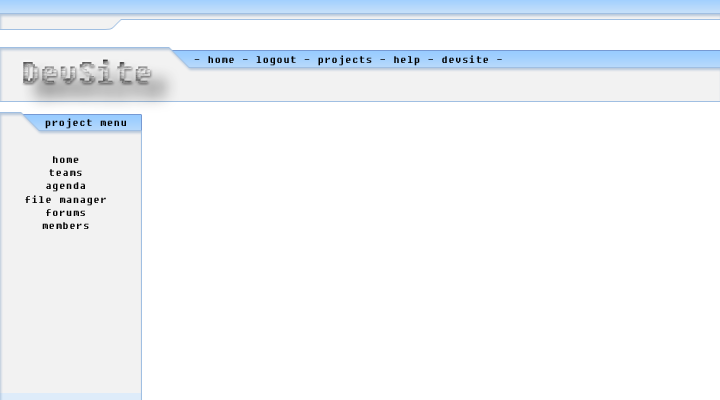
<style>
.page{position:relative;width:720px;height:400px;background:#ffffff}
.page>*{position:absolute;margin:0}
.t1{font:30px "Fixedsys"}
.t2{font:11px "Fixedsys";color:#000000}
</style>
<div class="page">
<p class="t1" style="left:23px;top:59px;width:127px;height:24px">DevSite</p>
<p class="t2" style="left:194px;top:55px;width:308px;height:11px">- home - logout - projects - help - devsite -</p>
<p class="t2" style="left:45px;top:118px;width:81px;height:11px">project menu</p>
<p class="t2" style="left:25px;top:156px;width:81px;height:73px;text-align:center">home<br>teams<br>agenda<br>file manager<br>forums<br>members</p>
</div>
